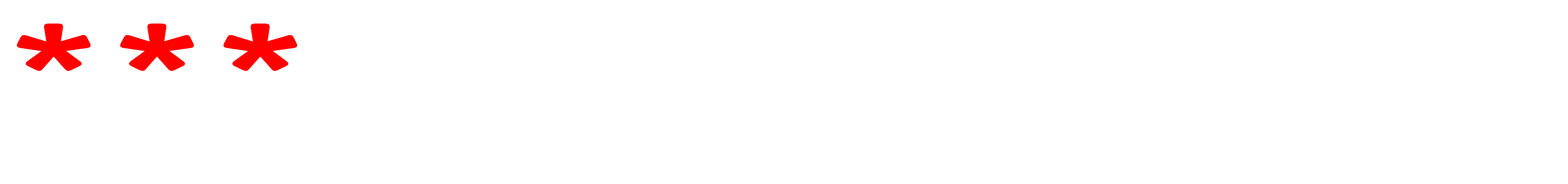
<style>
.page{position:relative;width:1568px;height:184px;background:#ffffff}
.page>*{position:absolute;margin:0}
.t1{font:118.1px "Courier-Bold";letter-spacing:-0.05em;color:#ff0000;font-weight:bold;scale:1.52 1}
</style>
<div class="page">
<p class="t1" style="left:17px;top:23px;width:280px;height:48px">***</p>
</div>
